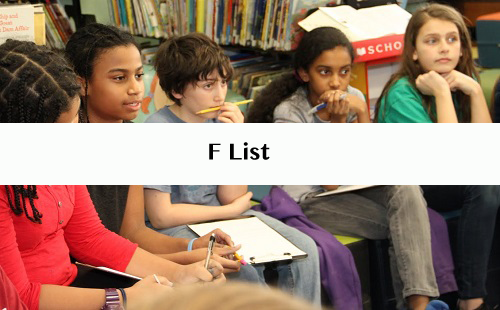
<style>
.page{position:relative;width:500px;height:310px}
.page>*{position:absolute;margin:0}
.t1{font:24px "TeluguMN-Bold";color:#020202}
</style>
<div class="page">
<p class="t1" style="left:209px;top:142px;width:61px;height:18px">F List</p>
</div>
